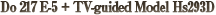
<style>
.page{position:relative;width:216px;height:15px;background:#ffffff}
.page>*{position:absolute;margin:0}
.t1{font:14px "RyuminPro-ExBold";letter-spacing:-0.08em;color:#4a3f32;font-weight:bold;scale:0.93 1}
</style>
<div class="page">
<p class="t1" style="left:0px;top:1px;width:215px;height:14px">Do 217 E-5 + TV-guided Model Hs293D</p>
</div>
